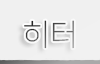
<style>
.page{position:relative;width:100px;height:64px;background:#f0f0f0}
.page>*{position:absolute;margin:0}
.t1{font:30px "NanumSquareL"}
</style>
<div class="page">
<p class="t1" style="left:24px;top:20px;width:50px;height:29px">히터</p>
</div>
